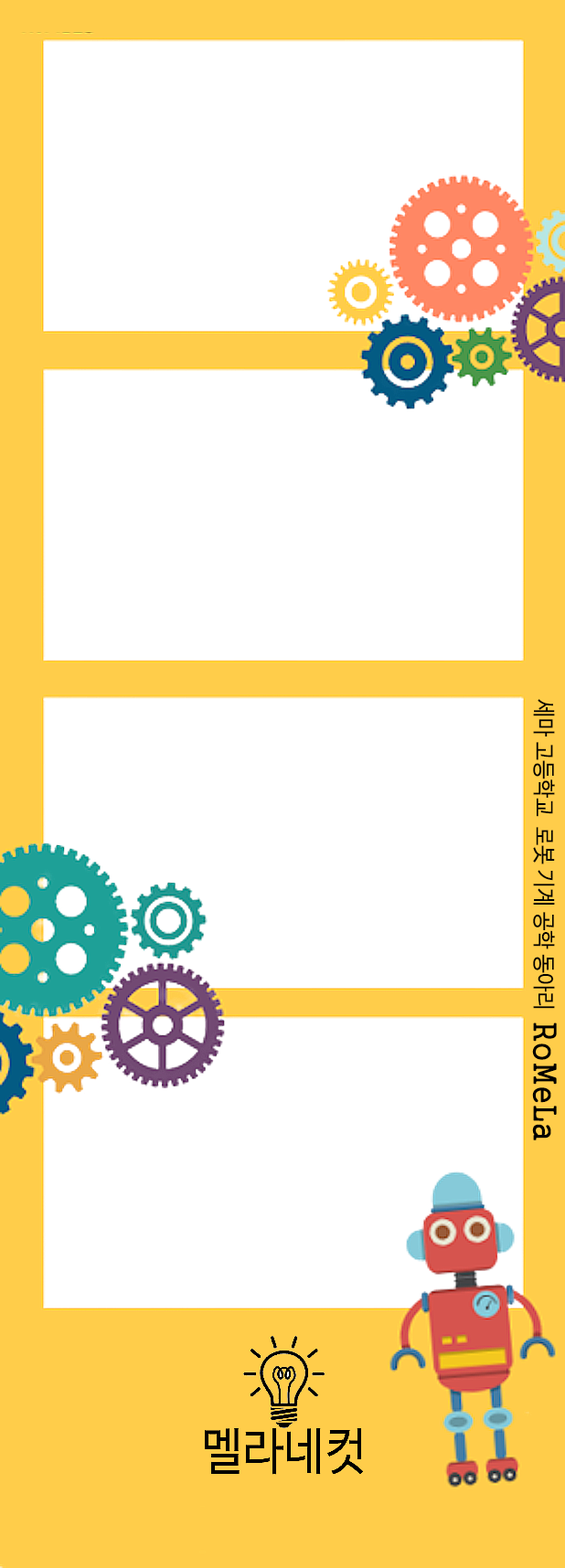
<style>
.page{position:relative;width:565px;height:1568px;background:#ffffff}
.page>*{position:absolute;margin:0}
.t1{font:22.8px "HancomGothicRegular";letter-spacing:-0.02em;color:#000000;scale:0.9 1}
.t2{font:32px "Gungsuh";letter-spacing:0.025em;color:#000000;scale:0.9 1}
</style>
<div class="page">
<p class="t1" style="left:533px;top:699px;width:22px;height:310px;rotate:90deg">세마 고등학교  로봇 기계 공학 동아리</p>
<p class="t2" style="left:532px;top:1022px;width:24px;height:118px;rotate:90deg">RoMeLa</p>
</div>
